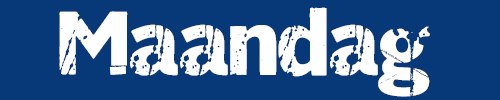
<style>
.page{position:relative;width:500px;height:100px;background:#073878}
.page>*{position:absolute;margin:0}
.t1{font:60px "321Perfect";color:#ffffff}
</style>
<div class="page">
<p class="t1" style="left:59px;top:7px;width:371px;height:90px">Maandag</p>
</div>
